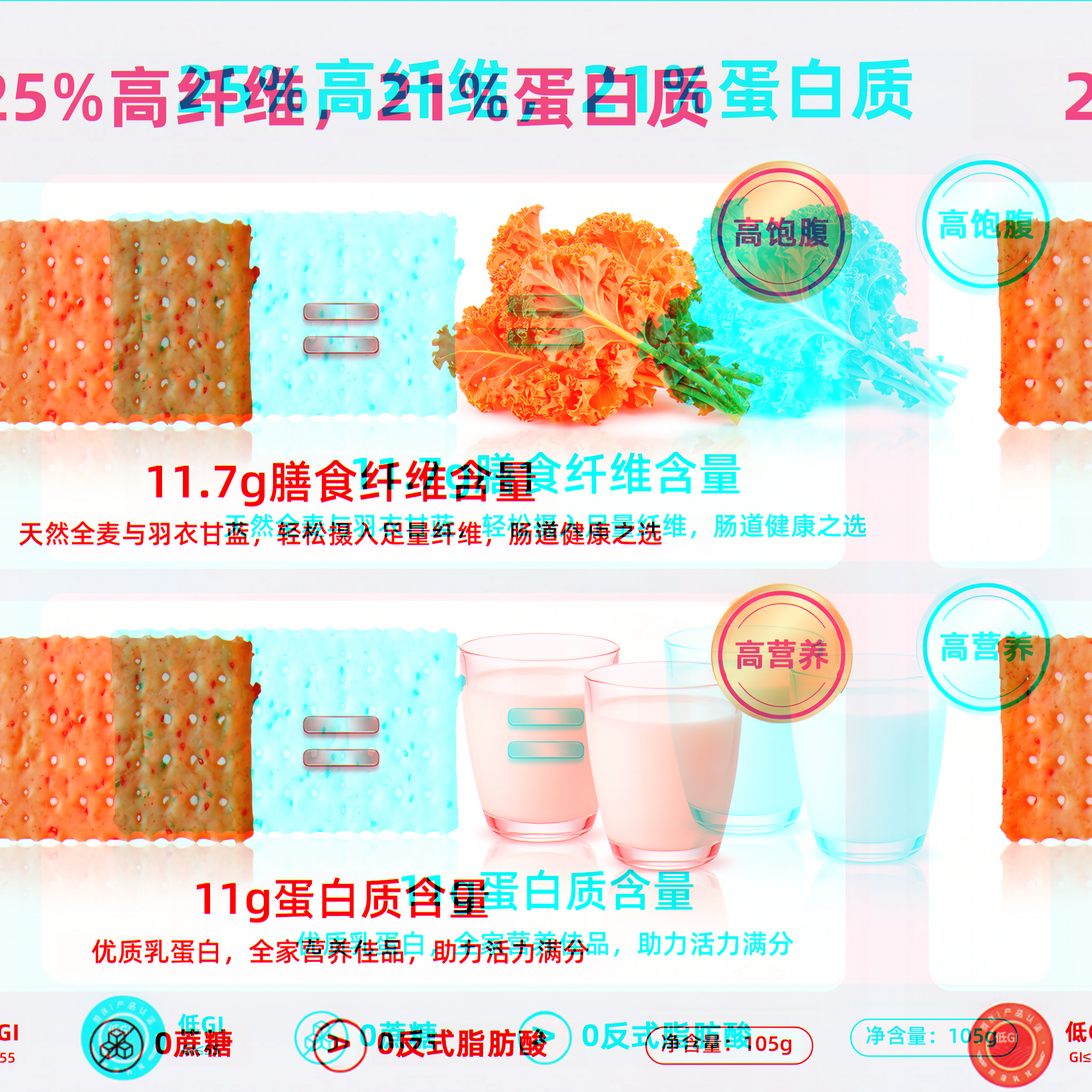
<style>
.page{position:relative;width:1092px;height:1092px}
.page>*{position:absolute;margin:0}
.t1{font:68px "AlibabaPuHuiTi-Bold";color:#19f0f3}
.t2{font:32.4px "AlibabaPuHuiTi-Medium";font-weight:bold}
.t3{font:45.8px "AlibabaPuHuiTi-Medium"}
.t4{font:26.2px "AlibabaPuHuiTi-Medium"}
.t5{font:44.4px "AlibabaPuHuiTi-Medium"}
.t6{font:26.7px "AlibabaPuHuiTi-Medium"}
.t7{font:22.7px "AlibabaPuHuiTi-Medium";font-weight:bold}
.t8{font:12px "AdobeHeitiStd-Regular";font-weight:bold}
.t9{font:30.2px "AlibabaPuHuiTi-Medium";font-weight:bold}
.t10{font:30.7px "AdobeHeitiStd-Regular";font-weight:bold}
.t11{font:20.9px "AlibabaPuHuiTi-Medium"}
</style>
<div class="page">
<p class="t1" style="left:178px;top:57px;width:735px;height:64px">25%高纤维，21%蛋白质</p>
<p class="t2" style="left:938px;top:207px;width:96px;height:31px">高饱腹</p>
<p class="t3" style="left:353px;top:451px;width:388px;height:47px">11.7g膳食纤维含量</p>
<p class="t4" style="left:224px;top:512px;width:642px;height:25px">天然全麦与羽衣甘蓝，轻松摄入足量纤维，肠道健康之选</p>
<p class="t5" style="left:401px;top:868px;width:293px;height:46px">11g蛋白质含量</p>
<p class="t6" style="left:296px;top:929px;width:497px;height:26px">优质乳蛋白，全家营养佳品，助力活力满分</p>
<p class="t7" style="left:178px;top:1013px;width:45px;height:21px">低GI</p>
<p class="t8" style="left:108px;top:1023px;width:22px;height:11px">低GI</p>
<p class="t9" style="left:360px;top:1020px;width:77px;height:28px">0蔗糖</p>
<p class="t10" style="left:532px;top:1025px;width:23px;height:19px">A</p>
<p class="t9" style="left:582px;top:1020px;width:170px;height:29px">0反式脂肪酸</p>
<p class="t11" style="left:866px;top:1024px;width:130px;height:22px">净含量：105g</p>
</div>
